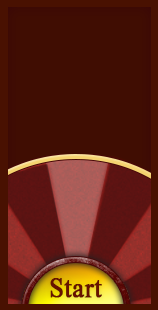
<style>
.page{position:relative;width:158px;height:310px;background:#400d02}
.page>*{position:absolute;margin:0}
.t1{font:34.9px "Aparajita";color:#661300;font-weight:bold;scale:0.92 1}
</style>
<div class="page">
<p class="t1" style="left:50px;top:278px;width:52px;height:20px">Start</p>
</div>
